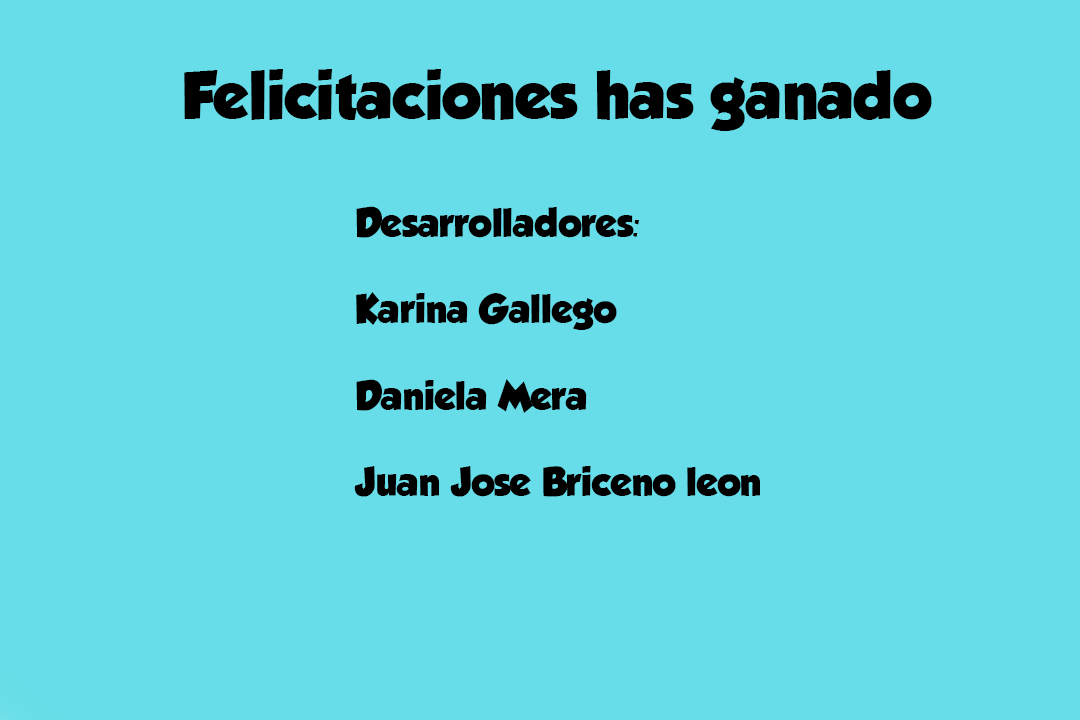
<style>
.page{position:relative;width:1080px;height:720px;background:#66dde8}
.page>*{position:absolute;margin:0}
.t1{font:60px "GROBOLD";color:#000000}
.t2{font:36px "GROBOLD";color:#000000}
</style>
<div class="page">
<p class="t1" style="left:184px;top:69px;width:748px;height:62px">Felicitaciones has ganado</p>
<p class="t2" style="left:354px;top:206px;width:406px;height:291px">Desarrolladores:<br><br>Karina Gallego<br><br>Daniela Mera<br> <br>Juan Jose Briceno leon</p>
</div>
